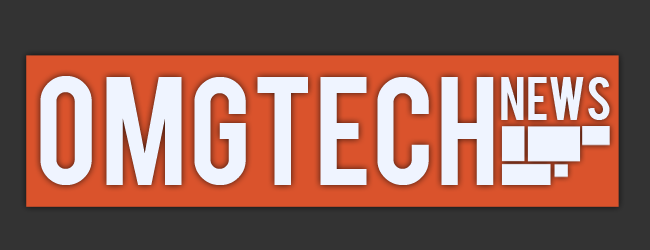
<style>
.page{position:relative;width:650px;height:250px;background:#333333}
.page>*{position:absolute;margin:0}
.t1{font:120px "Bebas";color:#eff4ff}
.t2{font:48px "Bebas";color:#eff4ff}
</style>
<div class="page">
<p class="t1" style="left:40px;top:76px;width:454px;height:109px">OMGTech</p>
<p class="t2" style="left:501px;top:77px;width:109px;height:43px">news</p>
</div>
